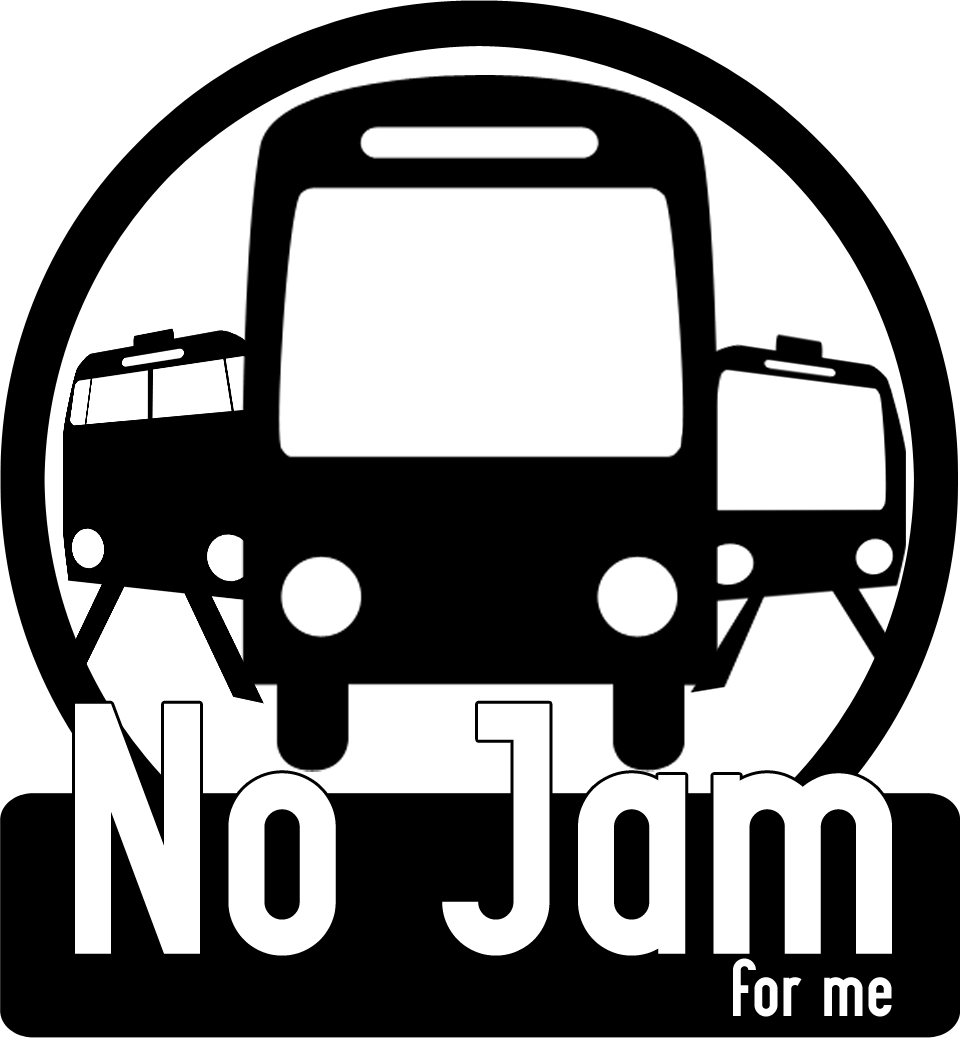
<style>
.page{position:relative;width:960px;height:1038px;background:#ffffff}
.page>*{position:absolute;margin:0}
.t1{font:356.7px "Practique";letter-spacing:0.02em;color:#ffffff}
.t2{font:76.4px "Practique";letter-spacing:0.02em;color:#ffffff}
</style>
<div class="page">
<p class="t1" style="left:75px;top:703px;width:817px;height:253px">No Jam</p>
<p class="t2" style="left:733px;top:958px;width:159px;height:59px">for me</p>
</div>
